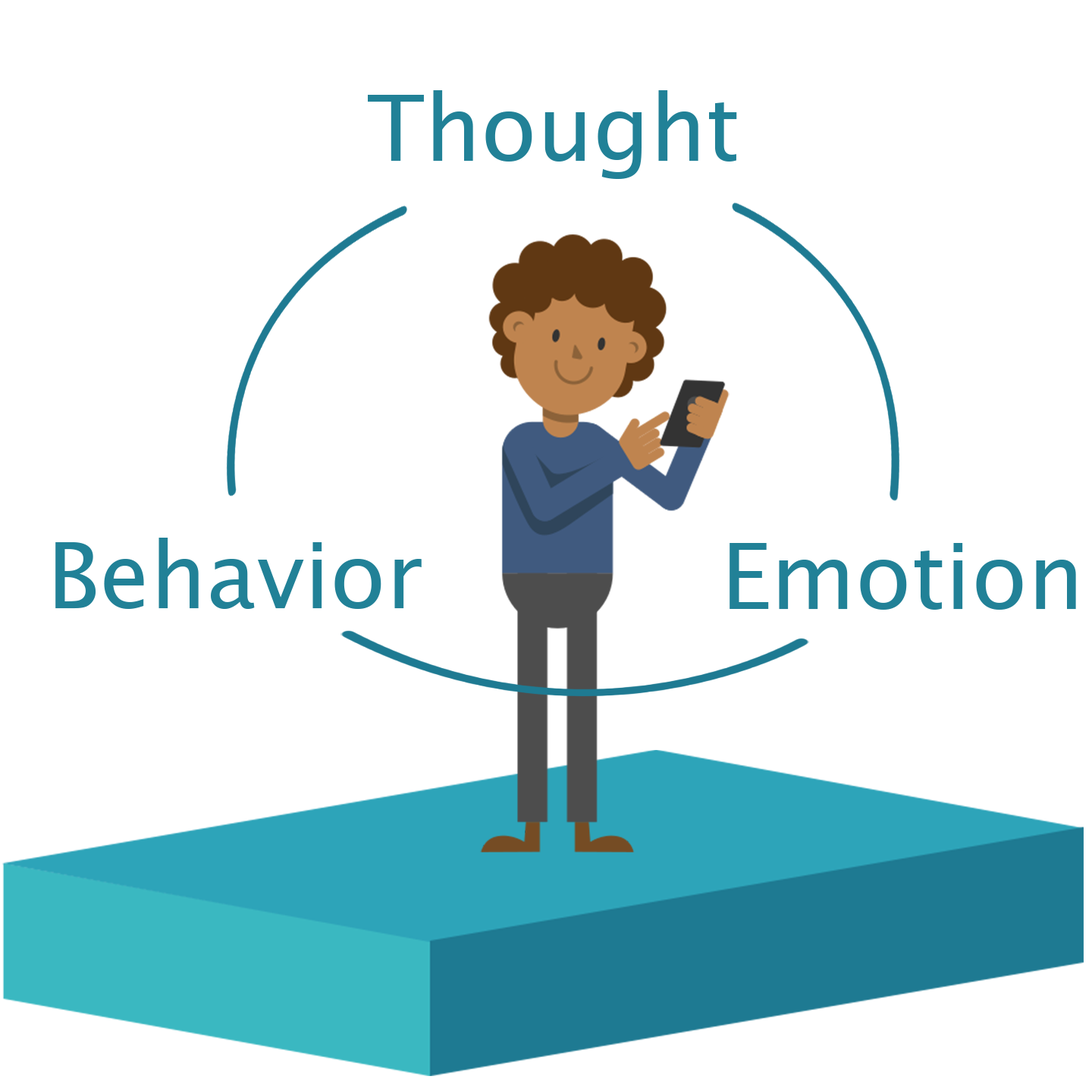
<style>
.page{position:relative;width:1092px;height:1092px;background:#ffffff}
.page>*{position:absolute;margin:0}
.t1{font:91px "LucidaSansUnicode";color:#218197}
</style>
<div class="page">
<p class="t1" style="left:368px;top:90px;width:369px;height:89px">Thought</p>
<p class="t1" style="left:55px;top:538px;width:367px;height:71px">Behavior</p>
<p class="t1" style="left:730px;top:543px;width:346px;height:67px">Emotion</p>
</div>
